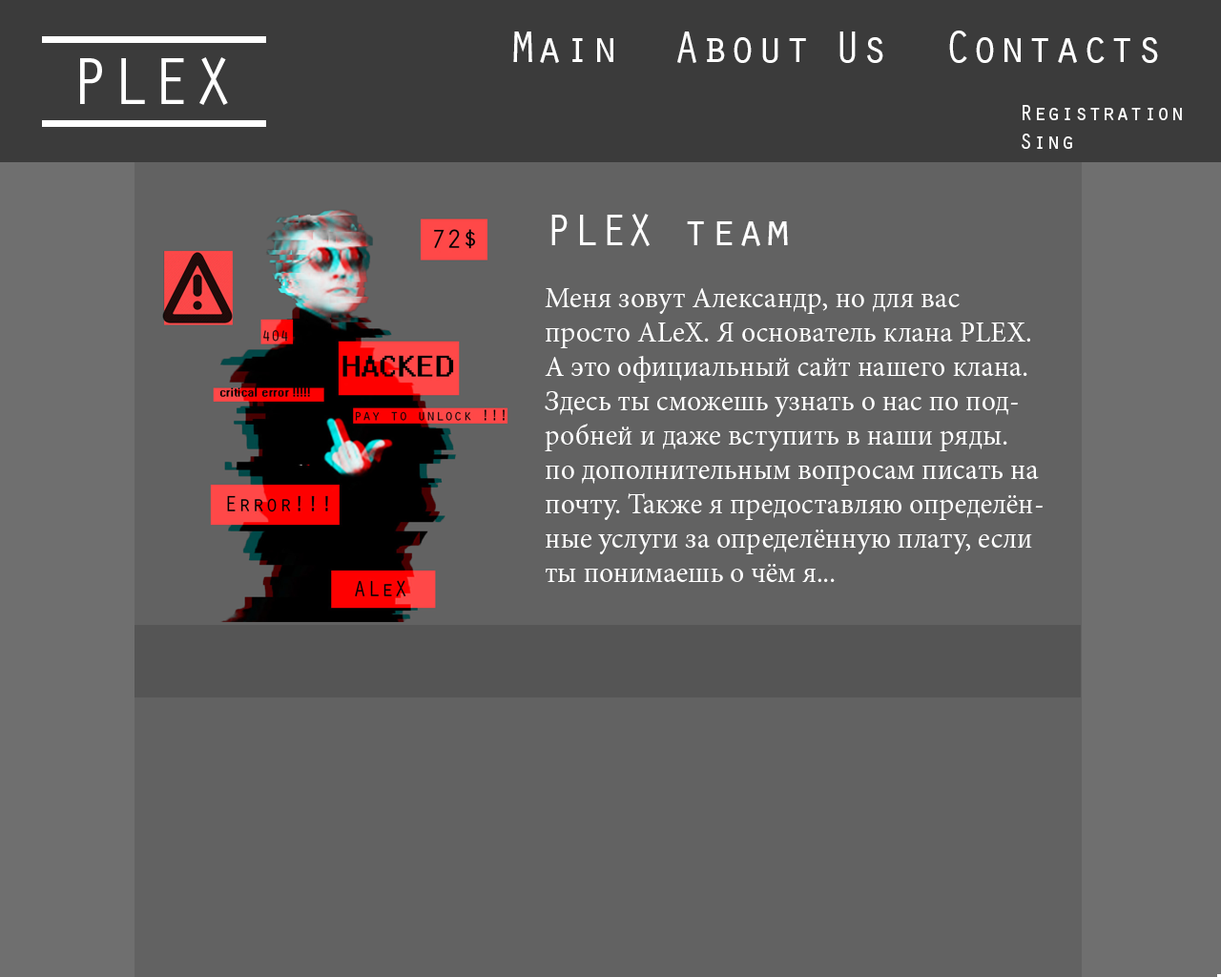
<style>
.page{position:relative;width:1221px;height:977px;background:#626262}
.page>*{position:absolute;margin:0}
.t1{font:45.8px "OratorStd";color:#ffffff}
.t2{font:22.9px/28.6px "OratorStd";color:#ffffff}
.t3{font:28.6px "MinionPro-Regular";color:#ffffff}
</style>
<div class="page">
<p class="t1" style="left:513px;top:31px;width:645px;height:32px">Main  About Us  Contacts</p>
<p class="t2" style="left:1022px;top:105px;width:160px;height:44px">Registration<br>Sing</p>
<p class="t3" style="left:545px;top:214px;width:498px;height:368px"><span class="t1">PLEX team<br><br></span>Меня зовут Александр, но для вас просто ALeX. Я основатель клана PLEX.<br>А это официальный сайт нашего клана.<br>Здесь ты сможешь узнать о нас по подробней и даже вступить в наши ряды.<br>по дополнительным вопросам писать на почту. Также я предоставляю определённые услуги за определённую плату, если ты понимаешь о чём я...</p>
</div>
